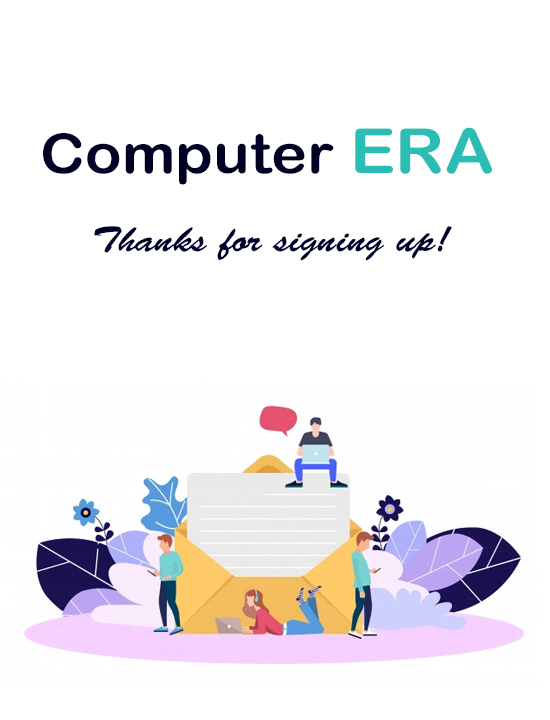
<style>
.page{position:relative;width:550px;height:720px;background:#ffffff}
.page>*{position:absolute;margin:0}
.t1{font:55px "ArialRoundedMTBold";color:#000024;scale:1.1 1}
.t2{font:62px "ArialRoundedMTBold";color:#2bbdb3;scale:1.1 1}
.t3{font:36px "BrushScriptStd";color:#00002d;scale:1.1 1}
</style>
<div class="page">
<p class="t1" style="left:43px;top:127px;width:449px;height:58px">Computer <span class="t2">ERA</span></p>
<p class="t3" style="left:94px;top:226px;width:358px;height:35px">Thanks for signing up!</p>
</div>
